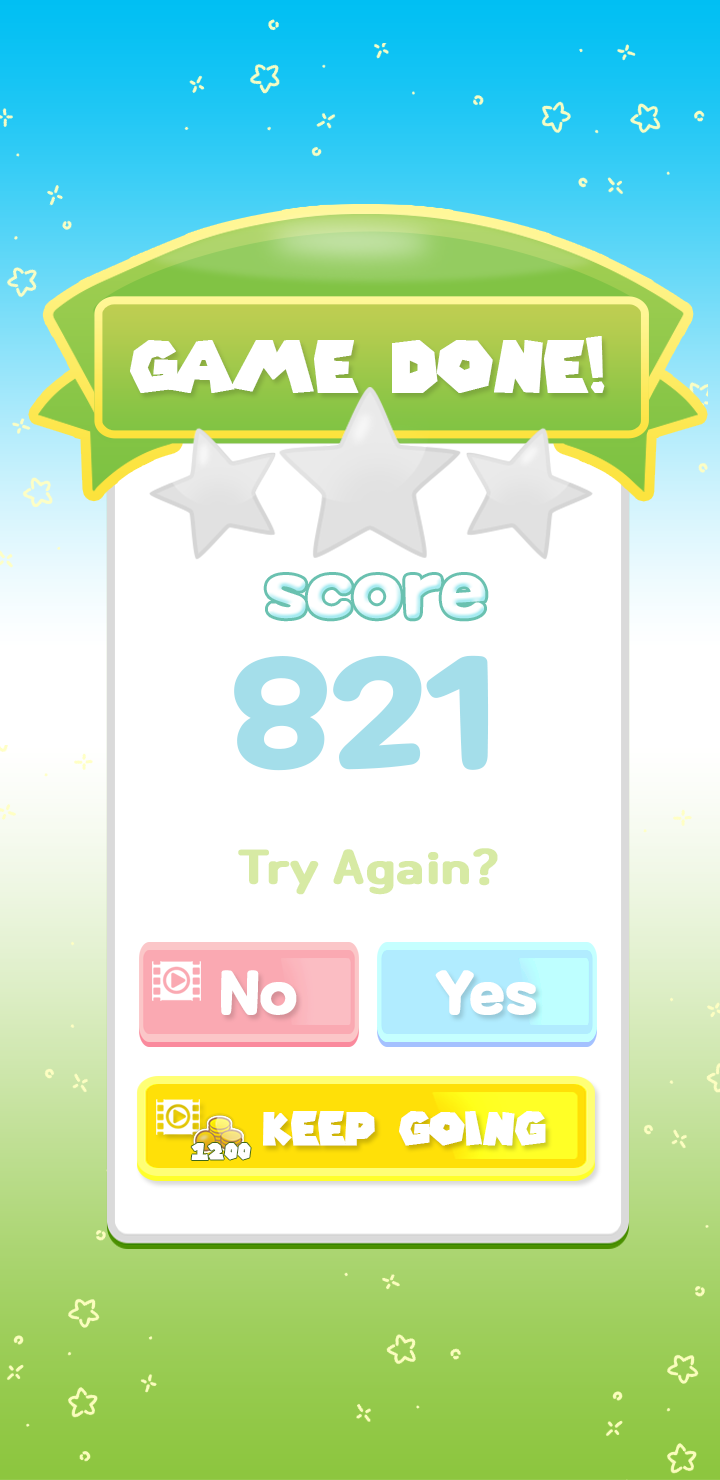
<style>
.page{position:relative;width:720px;height:1480px;background:#ffffff}
.page>*{position:absolute;margin:0}
.t1{font:70px "SuperMarioGalaxy";color:#ffffff;font-weight:bold}
.t2{font:76.4px "MaplestoryBold";color:#ffffff;font-weight:bold}
.t3{font:149.3px "MaplestoryBold";color:#a4deea;font-weight:bold}
.t4{font:45px "Cafe24Ssurround";color:#d7eaa4;font-weight:bold}
.t5{font:58.5px "MaplestoryBold";color:#ffffff;font-weight:bold}
.t6{font:45px "SuperMarioGalaxy";color:#ffffff;font-weight:bold}
.t7{font:21.8px "SuperMarioGalaxy";color:#ffffff;font-weight:bold}
</style>
<div class="page">
<p class="t1" style="left:130px;top:336px;width:475px;height:57px">Game Done!</p>
<p class="t2" style="left:266px;top:575px;width:220px;height:44px">score</p>
<p class="t3" style="left:234px;top:655px;width:255px;height:116px">821</p>
<p class="t4" style="left:238px;top:848px;width:260px;height:47px">Try Again?</p>
<p class="t5" style="left:221px;top:970px;width:76px;height:45px">No</p>
<p class="t5" style="left:435px;top:970px;width:101px;height:45px">Yes</p>
<p class="t6" style="left:263px;top:1111px;width:283px;height:35px">Keep Going</p>
<p class="t7" style="left:191px;top:1143px;width:60px;height:17px">1200</p>
</div>
